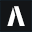
<style>
.page{position:relative;width:32px;height:32px;background:#131517}
.page>*{position:absolute;margin:0}
.t1{font:37.5px "BlackOpsOne-Regular";color:#ffffff;text-transform:uppercase}
</style>
<div class="page">
<p class="t1" style="left:7px;top:6px;width:18px;height:20px">^</p>
</div>
